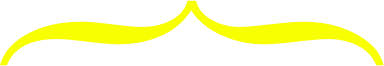
<style>
.page{position:relative;width:384px;height:66px;background:#ffffff}
.page>*{position:absolute;margin:0}
.t1{font:411.1px "Century";color:#f8ff00;scale:0.56 1}
</style>
<div class="page">
<p class="t1" style="left:0px;top:0px;width:384px;height:66px;rotate:-90deg">{</p>
</div>
